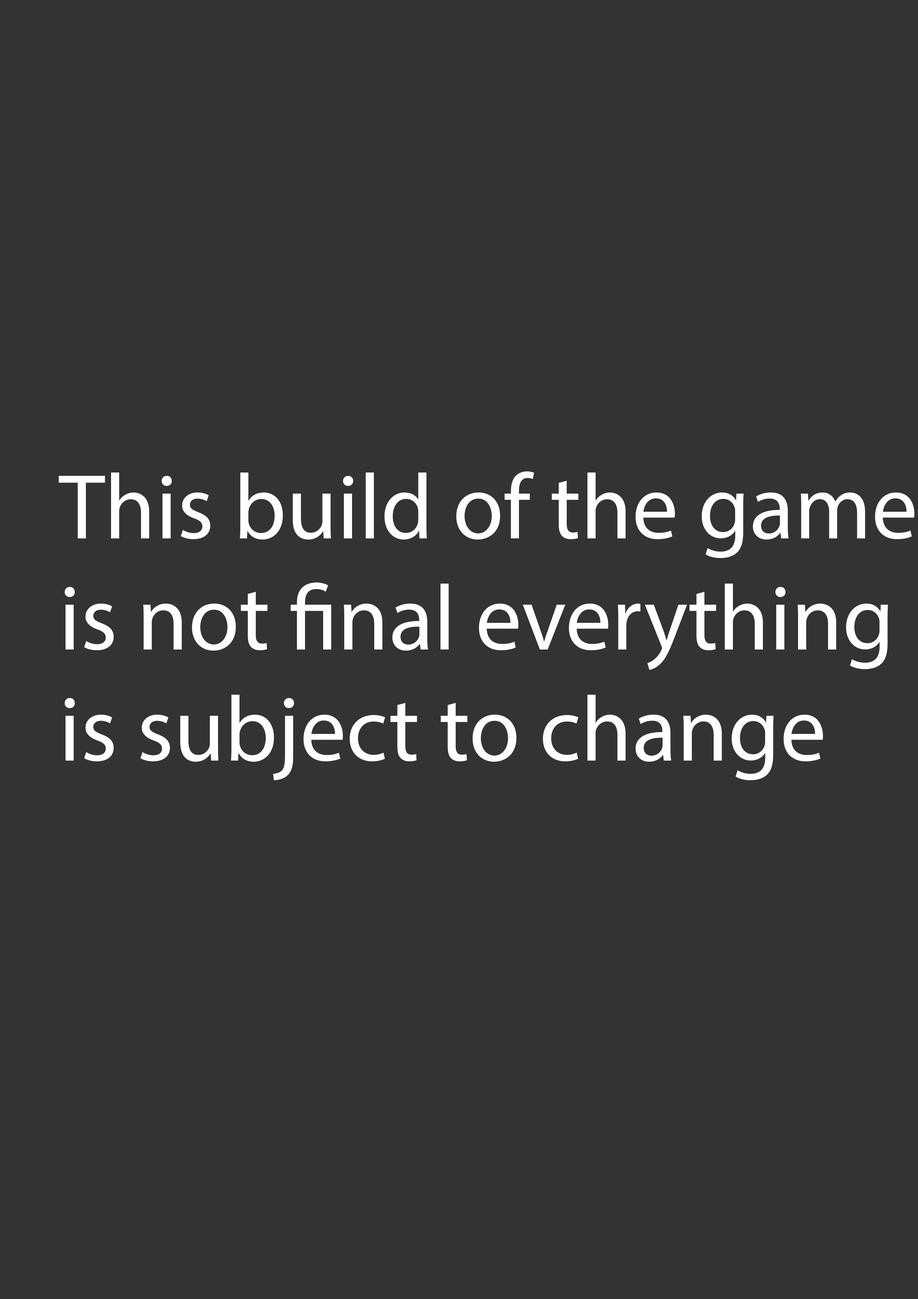
<style>
.page{position:relative;width:918px;height:1299px;background:#333333}
.page>*{position:absolute;margin:0}
.t1{font:92.6px "MyriadPro-Regular";color:#ffffff}
</style>
<div class="page">
<p class="t1" style="left:58px;top:471px;width:857px;height:309px">This build of the game <br>is not final everything<br>is subject to change</p>
</div>
